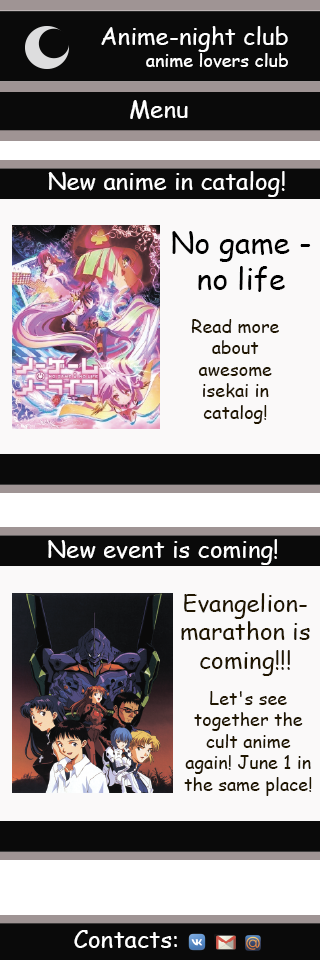
<style>
.page{position:relative;width:320px;height:960px;background:#faf9f9}
.page>*{position:absolute;margin:0}
.t1{font:24px "ComicSansMS";color:#ffffff}
.t2{font:18px "ComicSansMS";color:#ffffff}
.t3{font:30px "ComicSansMS";color:#000000}
.t4{font:18px "ComicSansMS";color:#201600}
.t5{font:24px "ComicSansMS";color:#201600}
</style>
<div class="page">
<p class="t1" style="left:101px;top:26px;width:187px;height:26px">Anime-night club</p>
<p class="t2" style="left:146px;top:53px;width:142px;height:15px">anime lovers club</p>
<p class="t1" style="left:130px;top:100px;width:58px;height:19px">Menu</p>
<p class="t1" style="left:48px;top:171px;width:237px;height:26px">New anime in catalog!</p>
<p class="t3" style="left:172px;top:231px;width:139px;height:61px;text-align:center">No game - no life</p>
<p class="t4" style="left:191px;top:319px;width:88px;height:105px;text-align:center">Read more about awesome isekai in catalog!</p>
<p class="t1" style="left:48px;top:539px;width:229px;height:26px">New event is coming!</p>
<p class="t5" style="left:181px;top:593px;width:129px;height:83px;text-align:center">Evangelion-<br>marathon is coming!!!</p>
<p class="t4" style="left:184px;top:691px;width:128px;height:105px;text-align:center">Let's see together the cult anime again! June 1 in the same place!</p>
<p class="t1" style="left:74px;top:930px;width:103px;height:18px">Contacts:</p>
</div>
